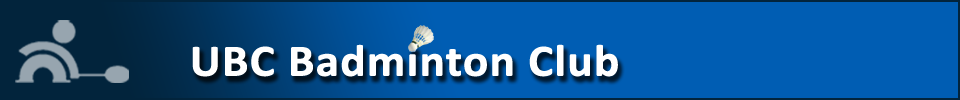
<style>
.page{position:relative;width:960px;height:100px;background:#005db3}
.page>*{position:absolute;margin:0}
.t1{font:45px "Calibri-Bold";color:#ffffff;font-weight:bold;scale:1.05 1}
</style>
<div class="page">
<p class="t1" style="left:192px;top:44px;width:426px;height:33px">UBC Badminton Club</p>
</div>
